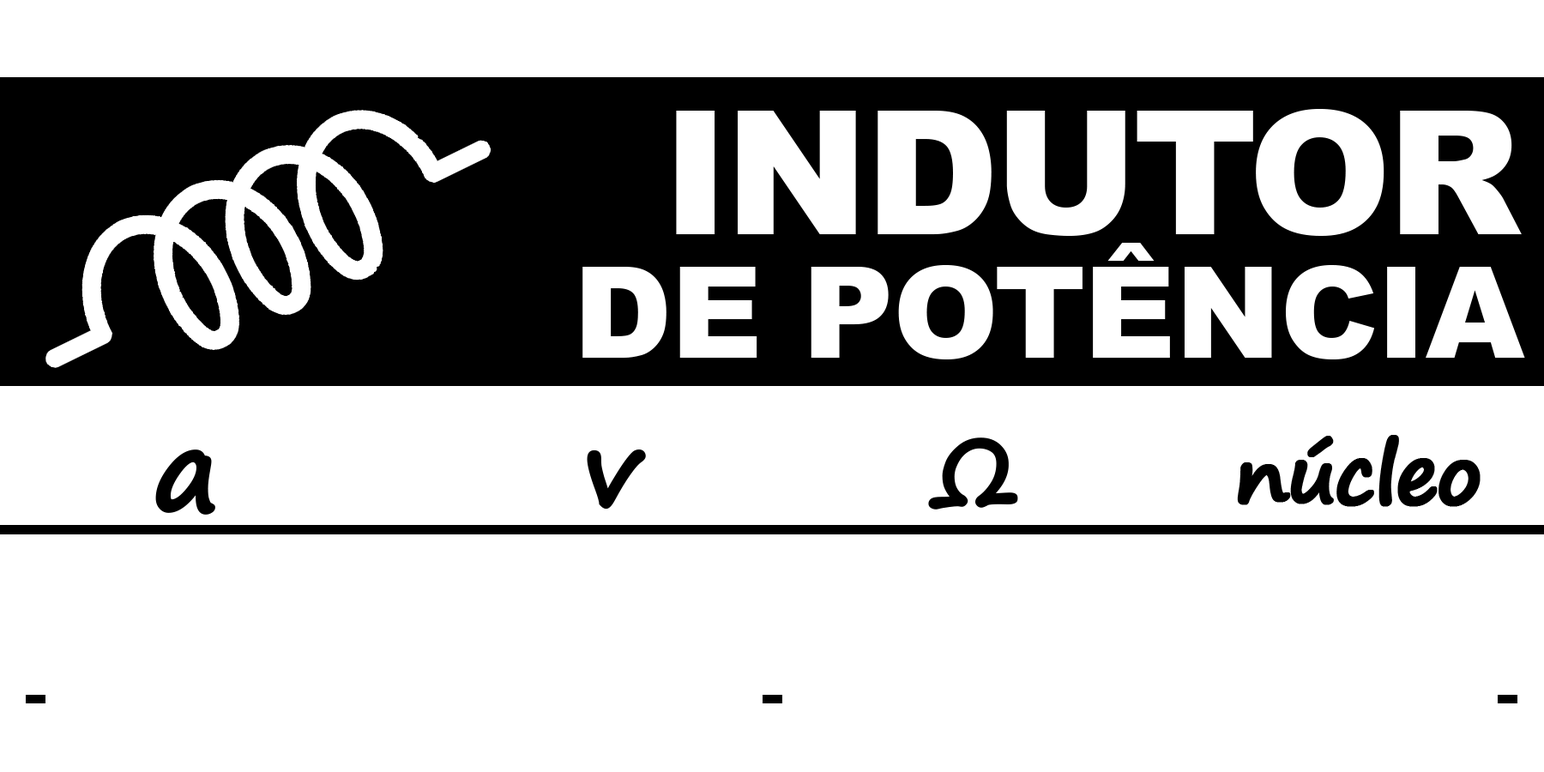
<style>
.page{position:relative;width:1544px;height:772px;background:#ffffff}
.page>*{position:absolute;margin:0}
.t1{font:172.5px "Arial-Black";letter-spacing:-0.025em;color:#ffffff}
.t2{font:127.1px "Arial-Black";letter-spacing:-0.01em;color:#ffffff}
.t3{font:90.8px "SegoePrint-Bold";letter-spacing:-0.05em;color:#000000;font-weight:bold}
.t4{font:81.7px "SegoePrint-Bold";letter-spacing:-0.05em;color:#000000;font-weight:bold}
.t5{font:112.6px "SegoePrint-Bold";letter-spacing:-0.15em;color:#000000;font-weight:bold}
.t6{font:102.2px "SegoePrint-Bold";letter-spacing:-0.15em;color:#000000;font-weight:bold}
</style>
<div class="page">
<p class="t1" style="left:676px;top:109px;width:846px;height:127px">INDUTOR</p>
<p class="t2" style="left:583px;top:243px;width:942px;height:116px">DE POTÊNCIA</p>
<p class="t3" style="left:928px;top:438px;width:90px;height:72px">Ω</p>
<p class="t4" style="left:1237px;top:435px;width:244px;height:72px">núcleo</p>
<p class="t5" style="left:155px;top:450px;width:60px;height:65px">a</p>
<p class="t6" style="left:587px;top:450px;width:59px;height:60px">v</p>
</div>
